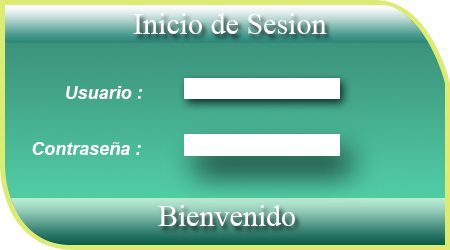
<style>
.page{position:relative;width:450px;height:250px}
.page>*{position:absolute;margin:0}
.t1{font:30px "TimesNewRomanPSMT";color:#fefefe}
.t2{font:18px "Arial-BoldItalicMT";color:#fefefe}
.t3{font:30px "TimesNewRomanPSMT";color:#ffffff}
</style>
<div class="page">
<p class="t1" style="left:133px;top:13px;width:194px;height:21px">Inicio de Sesion</p>
<p class="t2" style="left:66px;top:86px;width:77px;height:13px">Usuario :</p>
<p class="t2" style="left:32px;top:142px;width:109px;height:13px">Contraseña :</p>
<p class="t3" style="left:158px;top:205px;width:137px;height:21px">Bienvenido</p>
</div>
